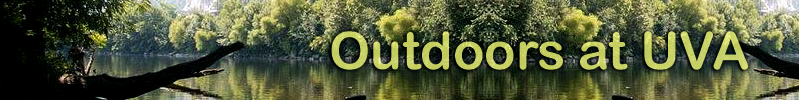
<style>
.page{position:relative;width:799px;height:100px}
.page>*{position:absolute;margin:0}
.t1{font:52.1px "ArialRoundedMTBold";color:#c8d165}
</style>
<div class="page">
<p class="t1" style="left:331px;top:31px;width:417px;height:39px">Outdoors at UVA</p>
<p class="t1" style="left:331px;top:31px;width:417px;height:39px">Outdoors at UVA</p>
</div>
